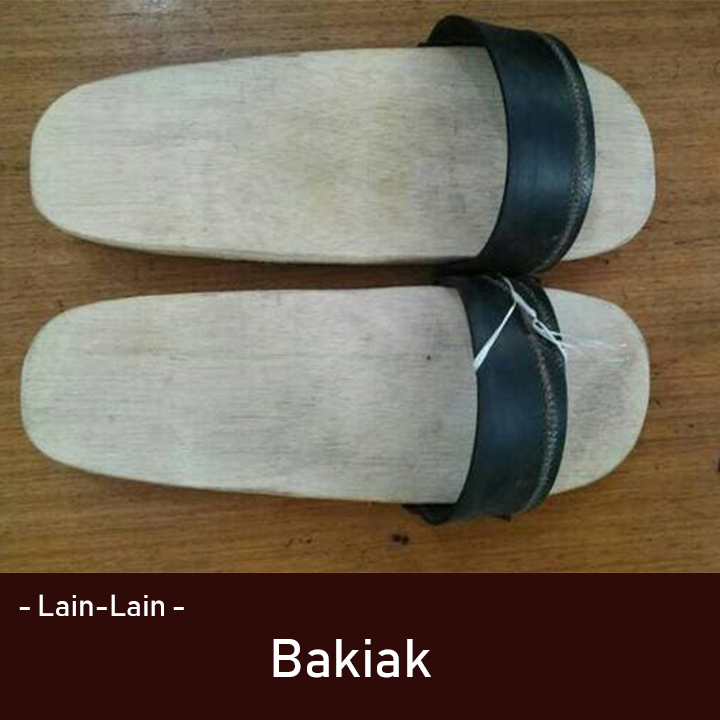
<style>
.page{position:relative;width:720px;height:720px}
.page>*{position:absolute;margin:0}
.t1{font:30px "Bahnschrift";color:#ffffff}
.t2{font:53.6px "Bahnschrift";color:#ffffff}
</style>
<div class="page">
<p class="t1" style="left:19px;top:594px;width:165px;height:22px">- Lain-Lain -</p>
<p class="t2" style="left:273px;top:639px;width:158px;height:39px">Bakiak</p>
</div>
